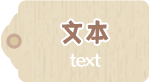
<style>
.page{position:relative;width:149px;height:82px}
.page>*{position:absolute;margin:0}
.t1{font:15.6px "shetumodengxiaofangti";color:#a07864;font-weight:bold;scale:0.94 1}
</style>
<div class="page">
<p class="t1" style="left:62px;top:20px;width:47px;height:24px">文本</p>
</div>
